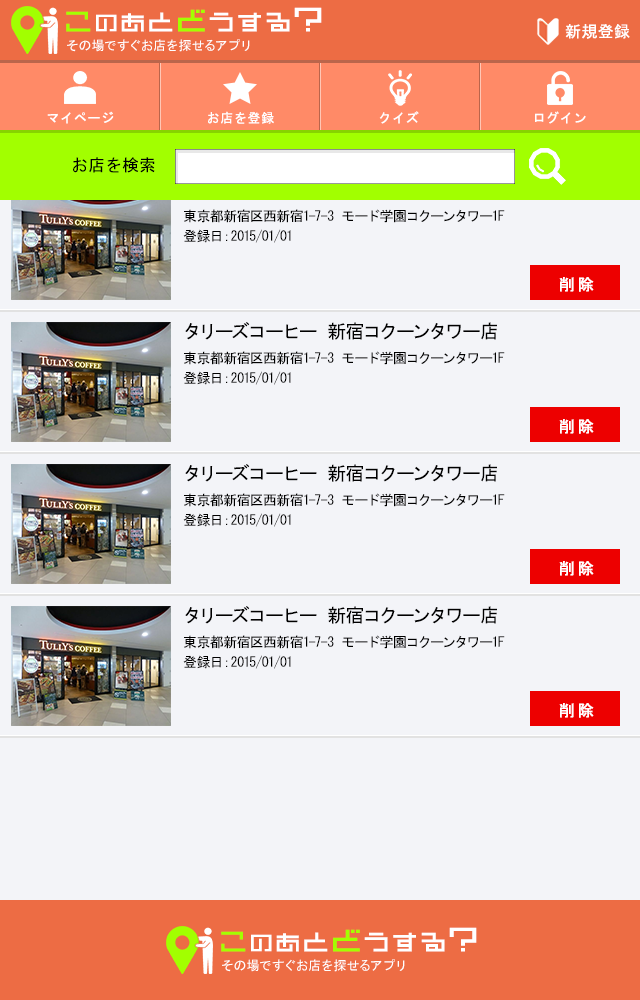
<style>
.page{position:relative;width:640px;height:1000px;background:#f3f4f8}
.page>*{position:absolute;margin:0}
.t1{font:27.6px "DBstraight12";letter-spacing:0.05em;color:#ffffff;font-weight:bold;scale:0.96 1}
.t2{font:28.8px "DBstraight12";letter-spacing:0.05em;color:#a2ff00;font-weight:bold;scale:0.96 1}
.t3{font:24.5px "DBstraight12";letter-spacing:0.05em;color:#ffffff;font-weight:bold;scale:0.96 1}
.t4{font:26.7px "DBstraight12";letter-spacing:0.05em;color:#ffffff;font-weight:bold;scale:0.96 1}
.t5{font:27.7px "DBstraight12";letter-spacing:0.05em;color:#ffffff;font-weight:bold;scale:0.96 1}
.t6{font:31.9px "DBstraight12";letter-spacing:0.05em;color:#a2ff00;font-weight:bold;scale:0.96 1}
.t7{font:34.9px "DBstraight12";letter-spacing:0.05em;color:#ffffff;font-weight:bold;scale:0.96 1}
.t8{font:16px "MS-Gothic";letter-spacing:0.05em;color:#ffffff}
.t9{font:13px "MS-Gothic";letter-spacing:0.05em;color:#ffffff}
.t10{font:17px "MS-Gothic";color:#000000}
.t11{font:14px "MS-Gothic";color:#000000}
.t12{font:16px "MS-Gothic";letter-spacing:0.16em;color:#ffffff;font-weight:bold}
.t13{font:19px "MS-Gothic";color:#000000}
</style>
<div class="page">
<p class="t1" style="left:66px;top:7px;width:256px;height:25px"><span class="t2">こ</span><span class="t3">の</span><span class="t4">あ</span><span class="t5">と</span><span class="t6">ど</span>うする<span class="t7">?</span></p>
<p class="t8" style="left:565px;top:24px;width:65px;height:15px">新規登録</p>
<p class="t9" style="left:67px;top:39px;width:183px;height:13px">その場ですぐお店を探せるアプリ</p>
<p class="t9" style="left:47px;top:111px;width:67px;height:13px">マイページ</p>
<p class="t9" style="left:208px;top:111px;width:66px;height:13px">お店を登録</p>
<p class="t9" style="left:379px;top:111px;width:40px;height:13px">クイズ</p>
<p class="t9" style="left:535px;top:111px;width:51px;height:13px">ログイン</p>
<p class="t10" style="left:73px;top:157px;width:82px;height:16px">お店を検索</p>
<p class="t11" style="left:184px;top:209px;width:321px;height:14px">東京都新宿区西新宿1-7-3 モード学園コクーンタワー1F</p>
<p class="t11" style="left:183px;top:229px;width:108px;height:14px">登録日：2015/01/01</p>
<p class="t12" style="left:559px;top:277px;width:35px;height:15px">削除</p>
<p class="t13" style="left:185px;top:322px;width:312px;height:18px">タリーズコーヒー 新宿コクーンタワー店</p>
<p class="t11" style="left:184px;top:351px;width:321px;height:14px">東京都新宿区西新宿1-7-3 モード学園コクーンタワー1F</p>
<p class="t11" style="left:183px;top:371px;width:108px;height:14px">登録日：2015/01/01</p>
<p class="t12" style="left:559px;top:419px;width:35px;height:15px">削除</p>
<p class="t13" style="left:185px;top:464px;width:312px;height:18px">タリーズコーヒー 新宿コクーンタワー店</p>
<p class="t11" style="left:184px;top:493px;width:321px;height:14px">東京都新宿区西新宿1-7-3 モード学園コクーンタワー1F</p>
<p class="t11" style="left:183px;top:513px;width:108px;height:14px">登録日：2015/01/01</p>
<p class="t12" style="left:559px;top:561px;width:35px;height:15px">削除</p>
<p class="t13" style="left:185px;top:606px;width:312px;height:18px">タリーズコーヒー 新宿コクーンタワー店</p>
<p class="t11" style="left:184px;top:635px;width:321px;height:14px">東京都新宿区西新宿1-7-3 モード学園コクーンタワー1F</p>
<p class="t11" style="left:183px;top:655px;width:108px;height:14px">登録日：2015/01/01</p>
<p class="t12" style="left:559px;top:703px;width:35px;height:15px">削除</p>
<p class="t1" style="left:221px;top:927px;width:256px;height:25px"><span class="t2">こ</span><span class="t3">の</span><span class="t4">あ</span><span class="t5">と</span><span class="t6">ど</span>うする<span class="t7">?</span></p>
<p class="t9" style="left:222px;top:959px;width:183px;height:13px">その場ですぐお店を探せるアプリ</p>
</div>
